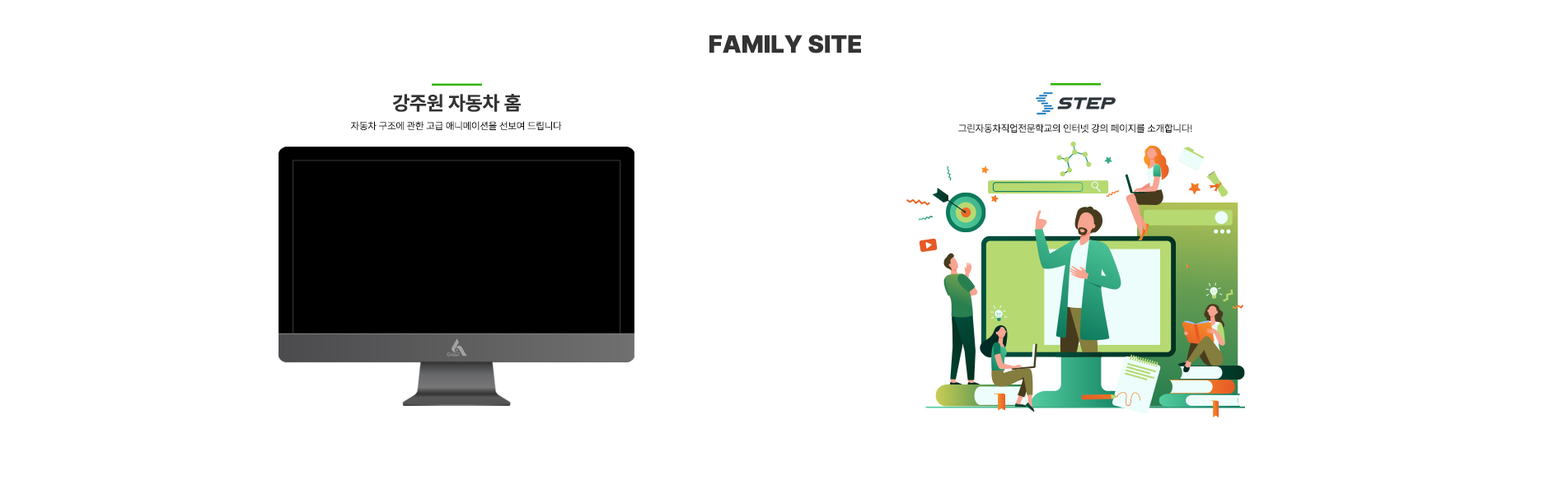
<style>
.page{position:relative;width:1568px;height:494px;background:#ffffff}
.page>*{position:absolute;margin:0}
.t1{font:24.7px "Pretendard-Black";color:#333333}
.t2{font:19.8px "Pretendard-Bold";color:#333333}
.t3{font:9.9px "Pretendard-Light";color:#000000}
</style>
<div class="page">
<p class="t1" style="left:709px;top:35px;width:152px;height:19px">FAMILY SITE</p>
<p class="t2" style="left:392px;top:94px;width:129px;height:18px">강주원 자동차 홈</p>
<p class="t3" style="left:351px;top:121px;width:211px;height:9px">자동차 구조에 관한 고급 애니메이션을 선보여 드립니다</p>
<p class="t3" style="left:958px;top:124px;width:234px;height:9px">그린자동차직업전문학교의 인터넷 강의 페이지를 소개합니다!</p>
</div>
